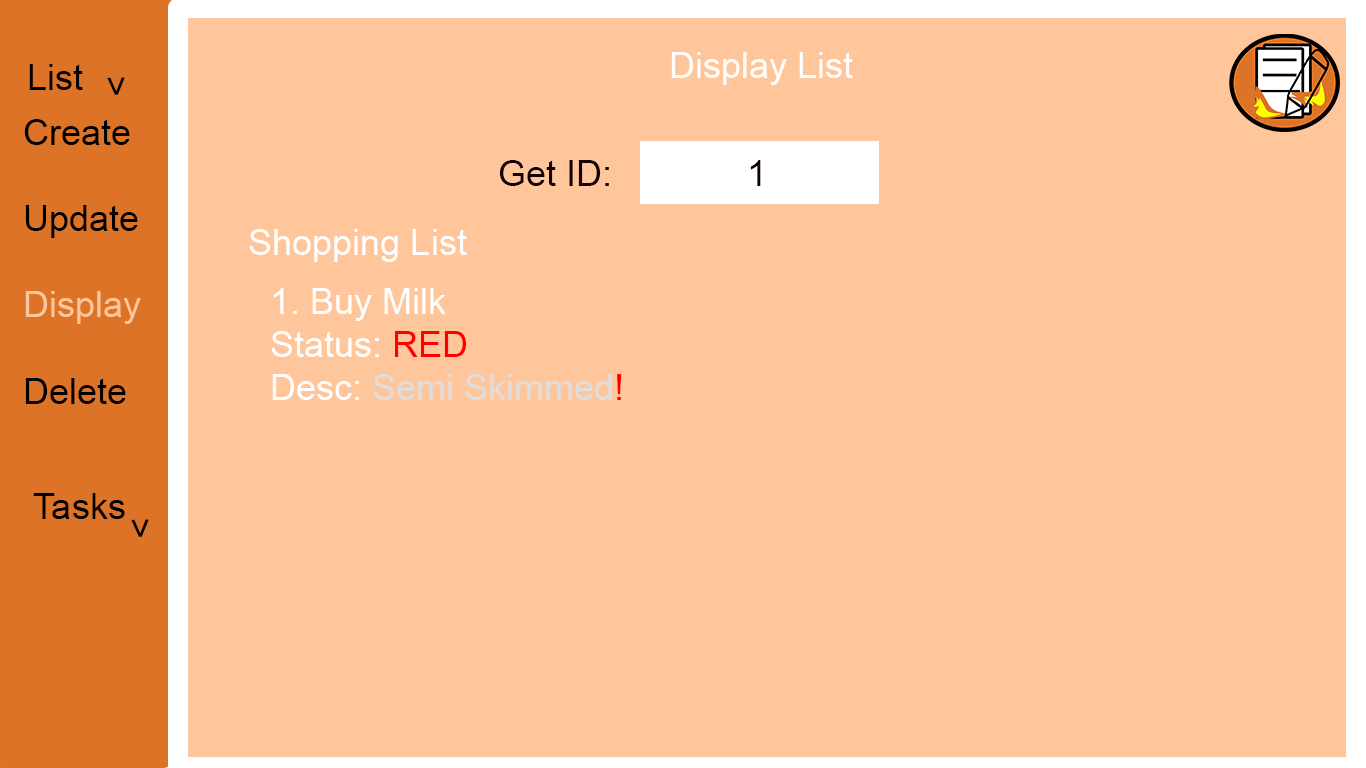
<style>
.page{position:relative;width:1366px;height:768px;background:#ffc69c}
.page>*{position:absolute;margin:0}
.t1{font:36px "ArialMT";color:#ffffff}
.t2{font:36px "ArialMT";color:#000000}
.t3{font:36px "ArialMT";color:#ffc69c}
.t4{font:36px "ArialMT";color:#130000}
.t5{font:36px "ArialMT";color:#ff0000}
.t6{font:36px "ArialMT";color:#dedede}
</style>
<div class="page">
<p class="t1" style="left:671px;top:52px;width:182px;height:33px">Display List</p>
<p class="t2" style="left:29px;top:64px;width:54px;height:26px">List</p>
<p class="t2" style="left:107px;top:77px;width:18px;height:18px;rotate:89deg">&gt;</p>
<p class="t2" style="left:24px;top:119px;width:117px;height:285px">Create<br><br>Update<br><br><span class="t3">Display<br></span><br>Delete</p>
<p class="t4" style="left:499px;top:160px;width:110px;height:26px">Get ID:</p>
<p class="t4" style="left:750px;top:160px;width:11px;height:26px">1</p>
<p class="t1" style="left:249px;top:229px;width:218px;height:33px">Shopping List</p>
<p class="t1" style="left:271px;top:288px;width:350px;height:112px">1. Buy Milk<br>Status: <span class="t5">RED<br></span>Desc: <span class="t6">Semi Skimmed</span><span class="t5">!</span></p>
<p class="t2" style="left:33px;top:493px;width:92px;height:26px">Tasks</p>
<p class="t2" style="left:131px;top:519px;width:18px;height:18px;rotate:89deg">&gt;</p>
</div>
